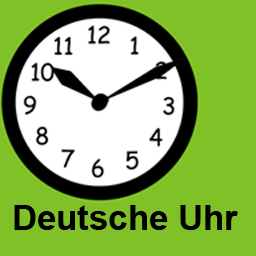
<style>
.page{position:relative;width:256px;height:256px;background:#7fc126}
.page>*{position:absolute;margin:0}
.t1{font:34.7px "Arial-BoldMT";color:#010101}
</style>
<div class="page">
<p class="t1" style="left:14px;top:205px;width:224px;height:25px">Deutsche Uhr</p>
</div>
